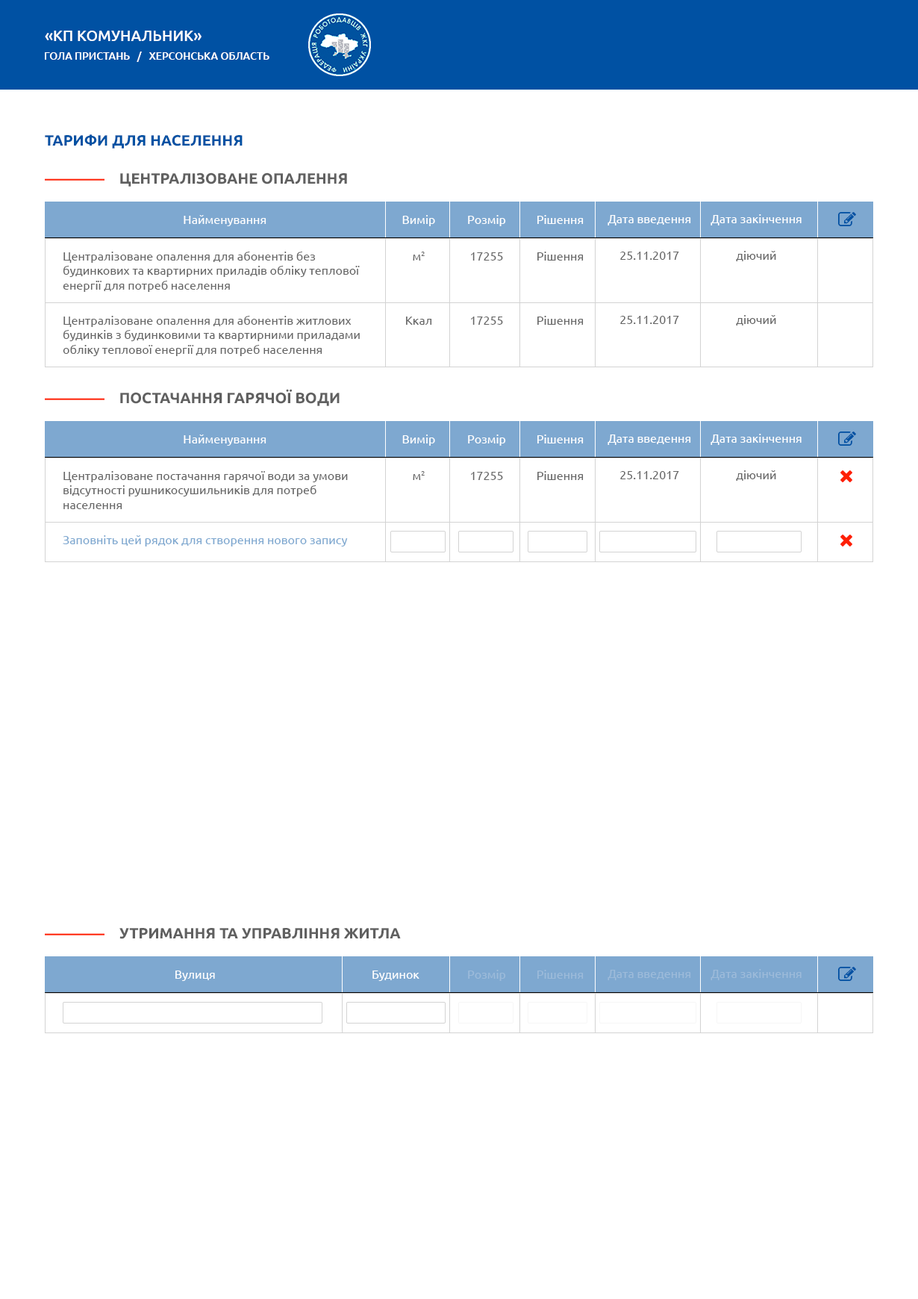
<style>
.page{position:relative;width:918px;height:1299px;background:#ffffff}
.page>*{position:absolute;margin:0}
.t1{font:14.9px "Ubuntu-Medium";color:#ffffff;text-transform:uppercase}
.t2{font:10.5px "Ubuntu-Medium";color:#ffffff;text-transform:uppercase}
.t3{font:14.9px "Ubuntu-Bold";color:#0051a3;text-transform:uppercase}
.t4{font:14.9px "Ubuntu-Bold";color:#606060;text-transform:uppercase}
.t5{font:11.9px "Ubuntu";color:#ffffff}
.t6{font:11.9px "Ubuntu";color:#666666}
.t7{font:11.9px "Ubuntu";color:#7ea8d0}
.t8{font:11.9px "Ubuntu";color:#9dbbda}
</style>
<div class="page">
<p class="t1" style="left:45px;top:31px;width:157px;height:10px">«КП КОМУНАЛЬНИК»</p>
<p class="t2" style="left:45px;top:52px;width:224px;height:10px">Гола Пристань   /   Херсонська область</p>
<p class="t3" style="left:45px;top:134px;width:198px;height:15px">ТАРИФИ ДЛЯ НАСЕЛЕННЯ</p>
<p class="t4" style="left:120px;top:172px;width:227px;height:15px">Централізоване опалення</p>
<p class="t5" style="left:184px;top:215px;width:82px;height:11px">Найменування</p>
<p class="t5" style="left:402px;top:215px;width:33px;height:11px">Вимір</p>
<p class="t5" style="left:468px;top:215px;width:38px;height:11px">Розмір</p>
<p class="t5" style="left:537px;top:215px;width:47px;height:9px">Рішення</p>
<p class="t5" style="left:608px;top:215px;width:83px;height:10px">Дата введення</p>
<p class="t5" style="left:711px;top:214px;width:91px;height:11px">Дата закінчення</p>
<p class="t6" style="left:63px;top:252px;width:297px;height:40px">Централізоване опалення для абонентів без будинкових та квартирних приладів обліку теплової енергії для потреб населення</p>
<p class="t6" style="left:413px;top:252px;width:12px;height:9px">м2</p>
<p class="t6" style="left:471px;top:252px;width:32px;height:9px">17255</p>
<p class="t6" style="left:537px;top:252px;width:47px;height:9px">Рішення</p>
<p class="t6" style="left:620px;top:252px;width:59px;height:8px">25.11.2017</p>
<p class="t6" style="left:736px;top:251px;width:40px;height:10px">діючий</p>
<p class="t6" style="left:63px;top:316px;width:297px;height:40px">Централізоване опалення для абонентів житлових будинків з будинковими та квартирними приладами обліку теплової енергії для потреб населення</p>
<p class="t6" style="left:406px;top:316px;width:26px;height:9px">Ккал</p>
<p class="t6" style="left:471px;top:316px;width:32px;height:9px">17255</p>
<p class="t6" style="left:537px;top:316px;width:47px;height:9px">Рішення</p>
<p class="t6" style="left:620px;top:316px;width:59px;height:8px">25.11.2017</p>
<p class="t6" style="left:736px;top:315px;width:40px;height:10px">діючий</p>
<p class="t4" style="left:120px;top:389px;width:220px;height:17px">Постачання гарячої води</p>
<p class="t5" style="left:184px;top:434px;width:82px;height:12px">Найменування</p>
<p class="t5" style="left:402px;top:434px;width:33px;height:12px">Вимір</p>
<p class="t5" style="left:468px;top:434px;width:38px;height:12px">Розмір</p>
<p class="t5" style="left:537px;top:434px;width:47px;height:9px">Рішення</p>
<p class="t5" style="left:608px;top:434px;width:83px;height:11px">Дата введення</p>
<p class="t5" style="left:711px;top:434px;width:91px;height:11px">Дата закінчення</p>
<p class="t6" style="left:63px;top:471px;width:285px;height:38px">Централізоване постачання гарячої води за умови відсутності рушникосушильників для потреб населення</p>
<p class="t6" style="left:413px;top:471px;width:12px;height:9px">м2</p>
<p class="t6" style="left:471px;top:472px;width:32px;height:8px">17255</p>
<p class="t6" style="left:537px;top:471px;width:47px;height:9px">Рішення</p>
<p class="t6" style="left:620px;top:471px;width:59px;height:8px">25.11.2017</p>
<p class="t6" style="left:736px;top:470px;width:40px;height:11px">діючий</p>
<p class="t7" style="left:63px;top:535px;width:285px;height:11px">Заповніть цей рядок для створення нового запису</p>
<p class="t4" style="left:119px;top:928px;width:282px;height:11px">УТРИМАННЯ ТА УПРАВЛІННЯ ЖИТЛА</p>
<p class="t5" style="left:175px;top:970px;width:40px;height:11px">Вулиця</p>
<p class="t5" style="left:372px;top:970px;width:47px;height:11px">Будинок</p>
<p class="t8" style="left:468px;top:970px;width:38px;height:11px">Розмір</p>
<p class="t8" style="left:537px;top:970px;width:47px;height:9px">Рішення</p>
<p class="t8" style="left:608px;top:970px;width:83px;height:10px">Дата введення</p>
<p class="t8" style="left:711px;top:969px;width:91px;height:11px">Дата закінчення</p>
</div>
